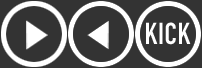
<style>
.page{position:relative;width:202px;height:68px;background:#333333}
.page>*{position:absolute;margin:0}
.t1{font:30px "DINEngschriftStd";letter-spacing:0.02em;color:#ffffff;text-transform:uppercase}
</style>
<div class="page">
<p class="t1" style="left:146px;top:22px;width:45px;height:23px">KICK</p>
</div>
